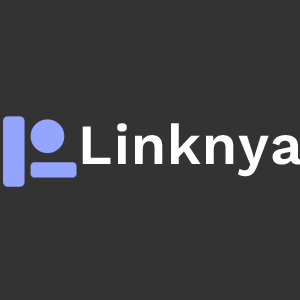
<style>
.page{position:relative;width:300px;height:300px;background:#333333}
.page>*{position:absolute;margin:0}
.t1{font:56.7px "WorkSans-SemiBold";color:#ffffff}
</style>
<div class="page">
<p class="t1" style="left:82px;top:123px;width:220px;height:54px">Linknya</p>
</div>
